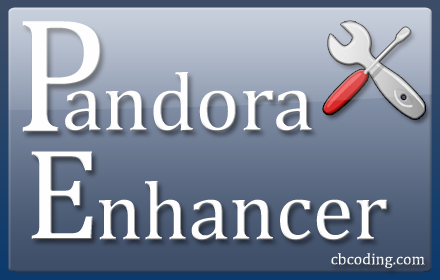
<style>
.page{position:relative;width:440px;height:280px}
.page>*{position:absolute;margin:0}
.t1{font:165.1px "Cambria";color:#fefefe}
.t2{font:83.5px "Cambria";color:#fefefe}
.t3{font:131.2px "Cambria";color:#fefefe}
.t4{font:16.1px "Cambria";color:#fefefe}
</style>
<div class="page">
<p class="t1" style="left:22px;top:21px;width:79px;height:111px">P</p>
<p class="t2" style="left:65px;top:72px;width:247px;height:60px">andora</p>
<p class="t3" style="left:31px;top:151px;width:62px;height:88px">E</p>
<p class="t2" style="left:99px;top:181px;width:288px;height:60px">nhancer</p>
<p class="t4" style="left:331px;top:253px;width:94px;height:16px">cbcoding.com</p>
</div>
